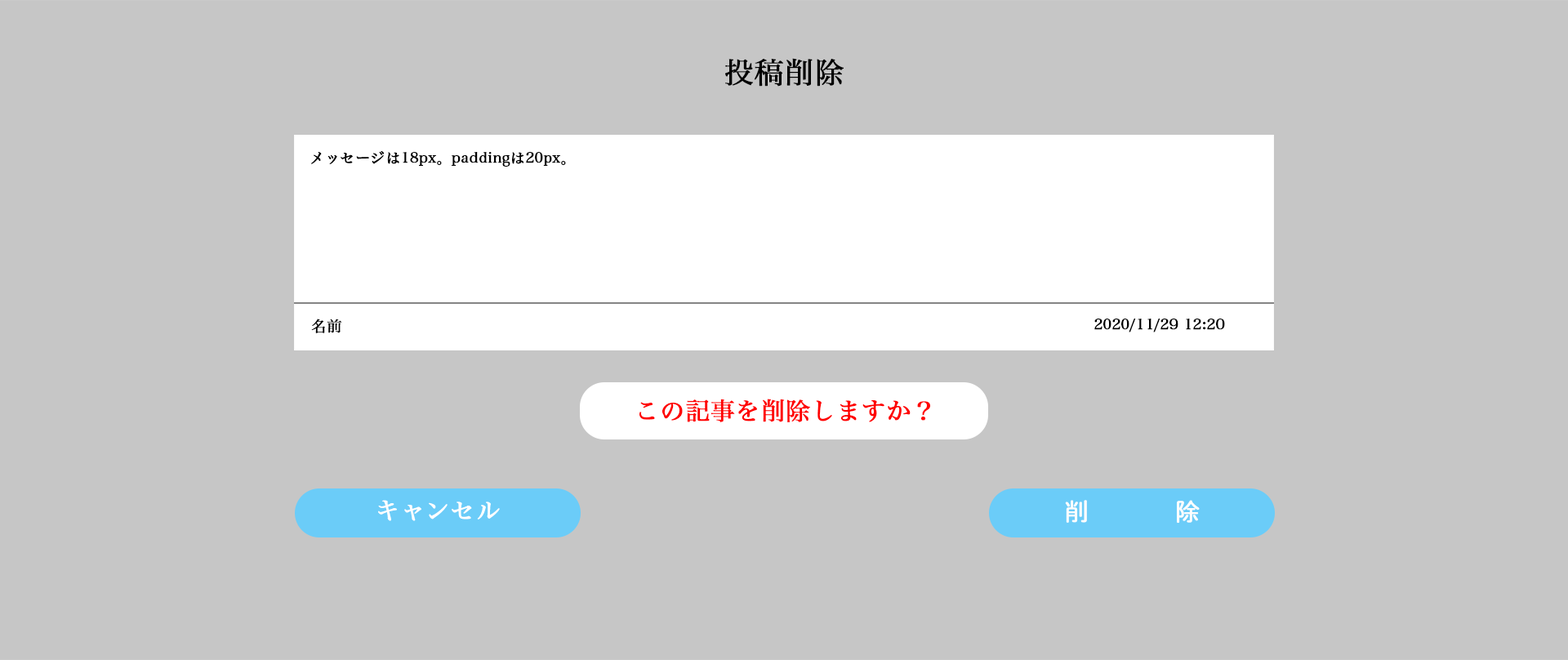
<style>
.page{position:relative;width:1568px;height:660px;background:#c6c6c6}
.page>*{position:absolute;margin:0}
.t1{font:29.4px "HiraMinPro-W3";color:#000000;font-weight:bold}
.t2{font:14.7px "HiraMinPro-W3";color:#000000;font-weight:bold}
.t3{font:24.5px "HiraMinPro-W3";color:#ff0000;font-weight:bold}
.t4{font:24.5px "HiraMinPro-W3";color:#ffffff;font-weight:bold}
.t5{font:24.5px "DNPShueiMGoStd-L";color:#fefefe;font-weight:bold}
</style>
<div class="page">
<p class="t1" style="left:725px;top:58px;width:119px;height:29px">投稿削除</p>
<p class="t2" style="left:311px;top:150px;width:255px;height:17px">メッセージは18px。paddingは20px。</p>
<p class="t2" style="left:311px;top:318px;width:31px;height:15px">名前</p>
<p class="t2" style="left:1094px;top:318px;width:131px;height:14px">2020/11/29 12:20</p>
<p class="t3" style="left:639px;top:399px;width:291px;height:23px">この記事を削除しますか？</p>
<p class="t4" style="left:378px;top:500px;width:122px;height:21px">キャンセル</p>
<p class="t5" style="left:1065px;top:500px;width:135px;height:23px">削除</p>
</div>
